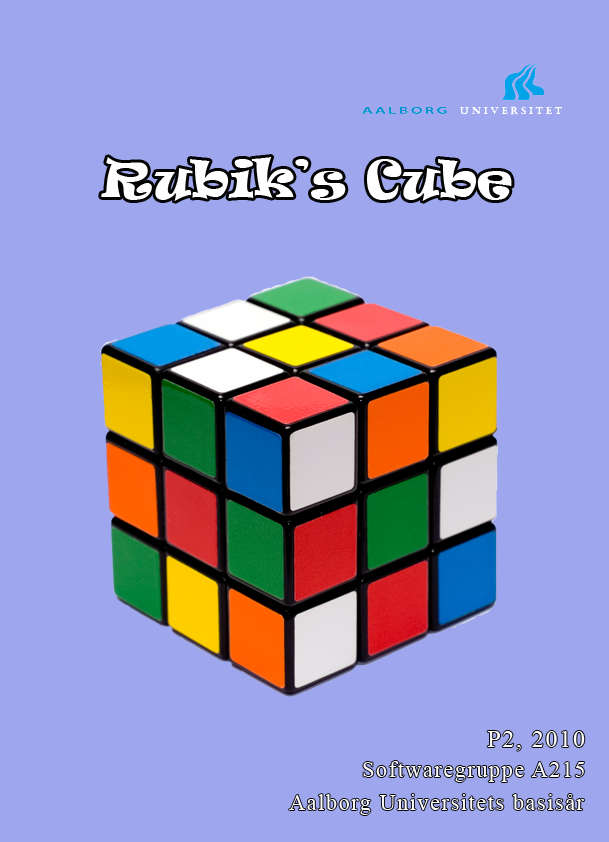
<style>
.page{position:relative;width:609px;height:842px;background:#9ea7ee}
.page>*{position:absolute;margin:0}
.t1{font:10px "Castellar";letter-spacing:0.3em;color:#ffffff}
.t2{font:48px "Ravie";color:#ffffff}
.t3{font:24px "TimesNewRomanPSMT";letter-spacing:0.075em;color:#fefefe}
.t4{font:22px "TimesNewRomanPSMT";letter-spacing:0.075em;color:#fefefe}
</style>
<div class="page">
<p class="t1" style="left:460px;top:106px;width:102px;height:9px">UNIVERSITET</p>
<p class="t2" style="left:101px;top:157px;width:411px;height:44px">Rubik’s Cube</p>
<p class="t3" style="left:487px;top:731px;width:98px;height:20px">P2, 2010</p>
<p class="t4" style="left:363px;top:761px;width:221px;height:21px">Softwaregruppe A215</p>
<p class="t4" style="left:289px;top:794px;width:295px;height:21px">Aalborg Universitets basisår</p>
</div>
